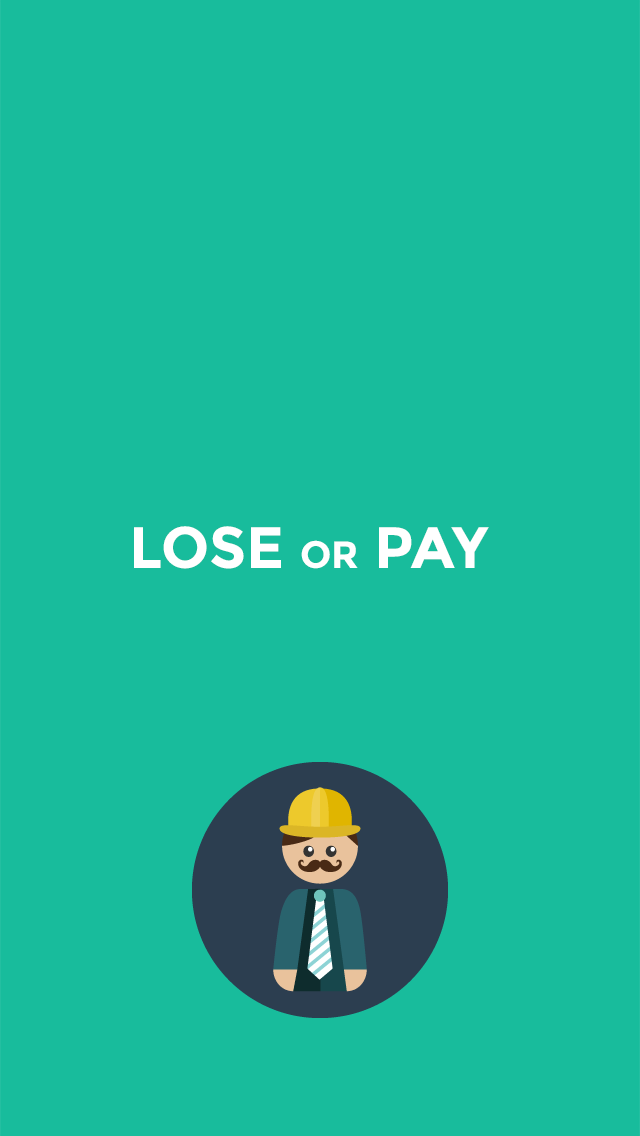
<style>
.page{position:relative;width:640px;height:1136px;background:#18bc9c}
.page>*{position:absolute;margin:0}
.t1{font:58.3px "Montserrat-Bold";color:#ffffff}
.t2{font:38px "Montserrat-Bold";color:#ffffff}
</style>
<div class="page">
<p class="t1" style="left:134px;top:526px;width:355px;height:43px">LOSE <span class="t2">OR</span> PAY</p>
</div>
